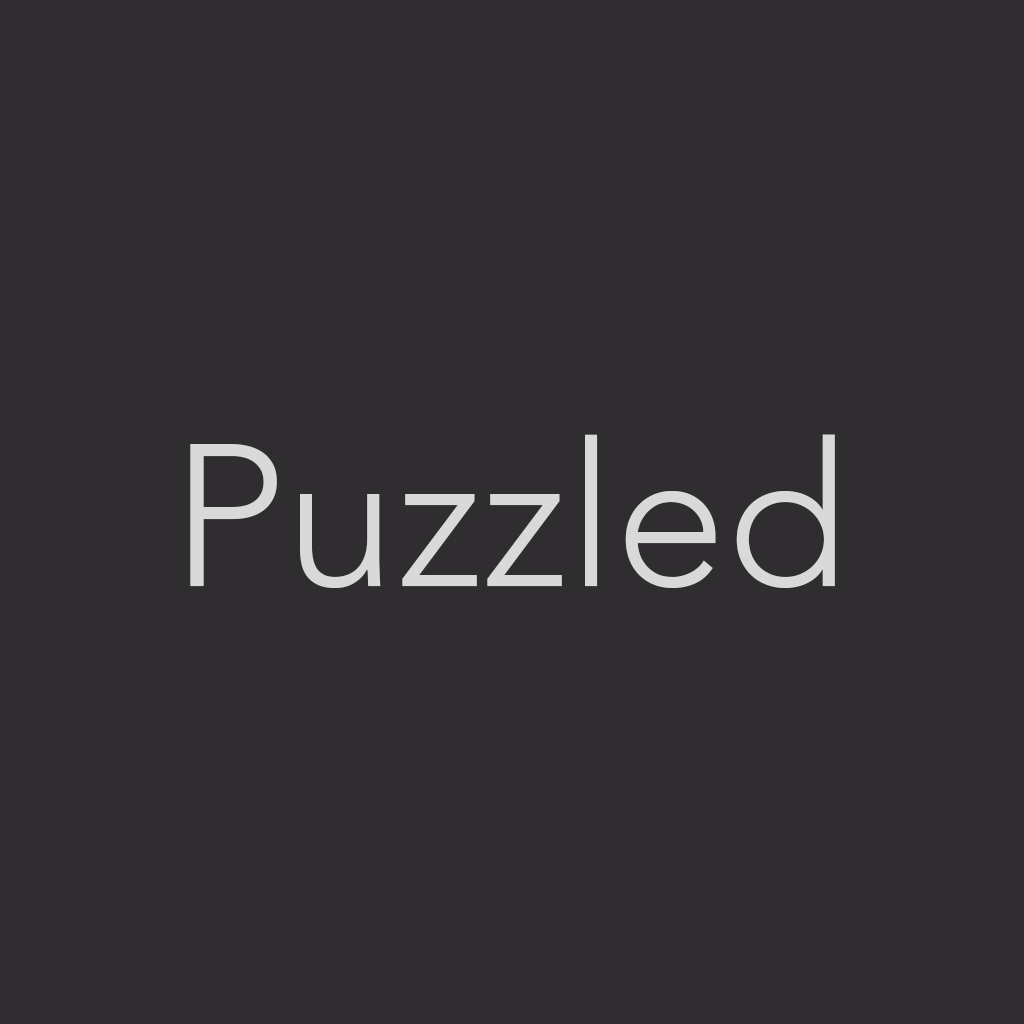
<style>
.page{position:relative;width:1024px;height:1024px;background:#2f2d2f}
.page>*{position:absolute;margin:0}
.t1{font:200px "Avenir-Light";color:#d9d9d9}
</style>
<div class="page">
<p class="t1" style="left:190px;top:434px;width:645px;height:154px">Puzzled</p>
</div>
